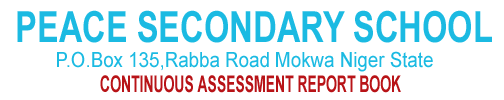
<style>
.page{position:relative;width:504px;height:100px;background:#ffffff}
.page>*{position:absolute;margin:0}
.t1{font:43px "Arial-BoldMT";color:#1bbae2;scale:0.76 1}
.t2{font:20.7px "ArialMT";color:#1bbae2;scale:0.9 1}
.t3{font:23px "Arial-BoldMT";color:#b81317;scale:0.6 1}
</style>
<div class="page">
<p class="t1" style="left:17px;top:10px;width:475px;height:33px">PEACE SECONDARY SCHOOL</p>
<p class="t2" style="left:57px;top:51px;width:376px;height:21px">P.O.Box 135,Rabba Road Mokwa Niger State</p>
<p class="t3" style="left:100px;top:75px;width:301px;height:18px">CONTINUOUS ASSESSMENT REPORT BOOK</p>
</div>
